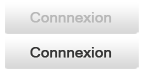
<style>
.page{position:relative;width:144px;height:70px}
.page>*{position:absolute;margin:0}
.t1{font:14.4px "MicrosoftSansSerif";color:#b8b8b8;font-weight:bold}
.t2{font:14.4px "MicrosoftSansSerif";color:#353535;font-weight:bold}
</style>
<div class="page">
<p class="t1" style="left:30px;top:12px;width:82px;height:11px">Connnexion</p>
<p class="t2" style="left:30px;top:47px;width:82px;height:11px">Connnexion</p>
</div>
